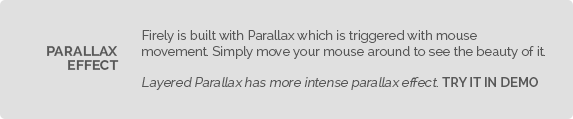
<style>
.page{position:relative;width:573px;height:119px;background:#e0e0e0}
.page>*{position:absolute;margin:0}
.t1{font:13px "Raleway-Regular";color:#585858}
.t2{font:13px "Raleway-Regular";color:#585858;font-style:italic}
.t3{font:13px "Raleway-SemiBold";color:#585858}
.t4{font:14px "Raleway-Bold";color:#585858}
</style>
<div class="page">
<p class="t1" style="left:142px;top:30px;width:403px;height:60px">Firely is built with Parallax which is triggered with mouse movement. Simply move your mouse around to see the beauty of it.<br><br><span class="t2">Layered Parallax has more intense parallax effect. </span><span class="t3">TRY IT IN DEMO</span></p>
<p class="t4" style="left:47px;top:46px;width:70px;height:10px">PARALLAX</p>
<p class="t4" style="left:68px;top:60px;width:51px;height:10px">EFFECT</p>
</div>
